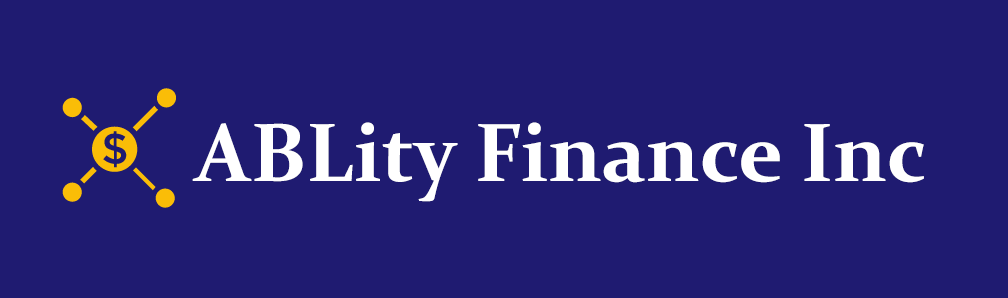
<style>
.page{position:relative;width:1008px;height:298px;background:#1f1b71}
.page>*{position:absolute;margin:0}
.t1{font:83.3px "Constantia-Bold";color:#ffffff}
</style>
<div class="page">
<p class="t1" style="left:192px;top:122px;width:732px;height:80px">ABLity Finance Inc</p>
</div>
